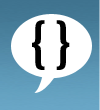
<style>
.page{position:relative;width:100px;height:110px;background:#ffffff}
.page>*{position:absolute;margin:0}
.t1{font:59.8px "FranklinGothic-MediumCond";color:#000000}
</style>
<div class="page">
<p class="t1" style="left:32px;top:20px;width:38px;height:50px">{ }</p>
</div>
